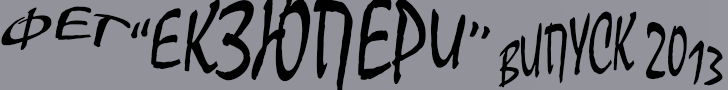
<style>
.page{position:relative;width:728px;height:90px;background:#92929b}
.page>*{position:absolute;margin:0}
.t1{font:48px "Mistral";color:#000000;scale:1.75 1}
.t2{font:48px "Mistral";color:#000000}
</style>
<div class="page">
<p class="t1" style="left:1px;top:6px;width:130px;height:44px">ФЕГ</p>
<p class="t2" style="left:498px;top:11px;width:225px;height:77px">ВИПУСК 2013</p>
</div>
